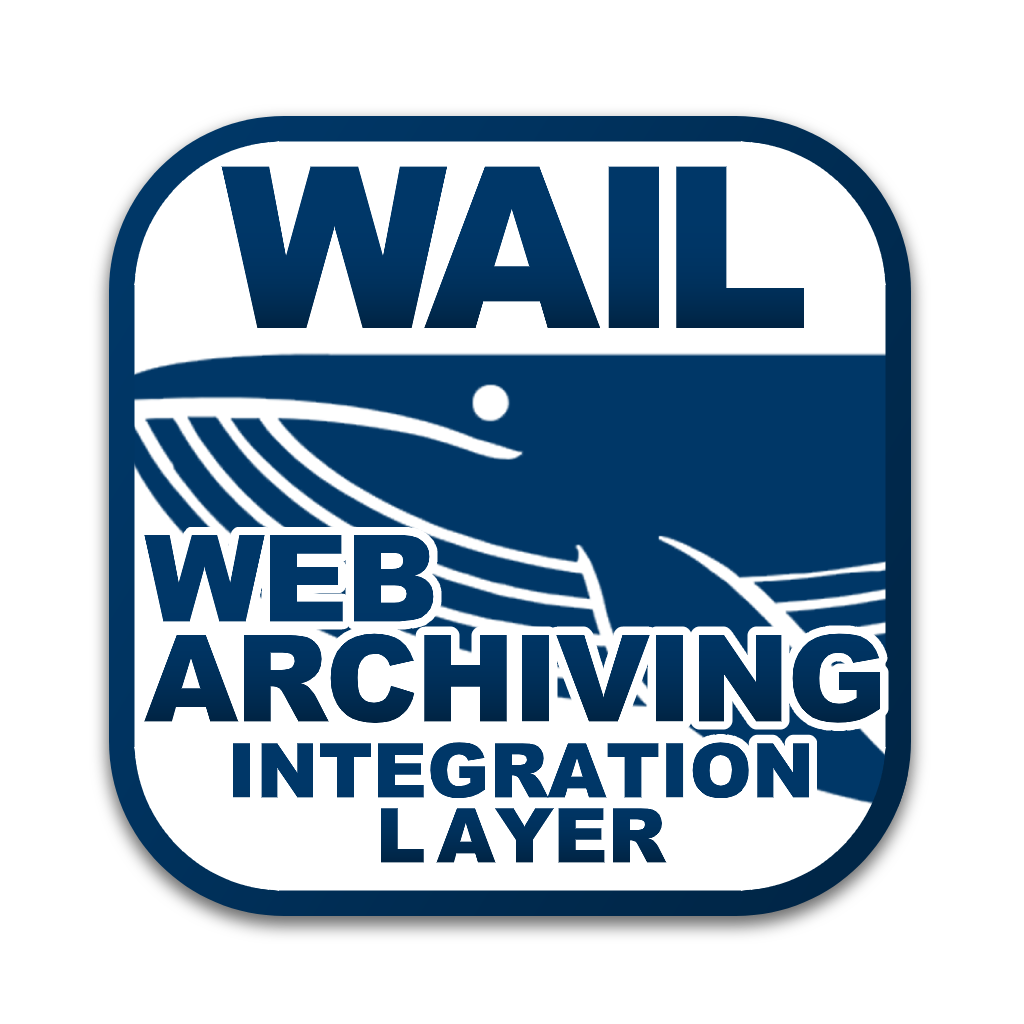
<style>
.page{position:relative;width:1024px;height:1024px;background:#ffffff}
.page>*{position:absolute;margin:0}
.t1{font:225px "Arial-Black";letter-spacing:-0.1em;color:#003768}
.t2{font:225px "Arial-Black";letter-spacing:-0.04em;color:#003768}
.t3{font:225px "Arial-Black";letter-spacing:-0.08em;color:#003768}
.t4{font:225px "Arial-Black";letter-spacing:-0.02em;color:#003768}
.t5{font:120px/100px "Arial-Black";letter-spacing:-0.025em;color:#003768}
.t6{font:75px/65px "Arial-Black";color:#003768}
.t7{font:75px/65px "Arial-Black";letter-spacing:0.15em;color:#003768}
</style>
<div class="page">
<p class="t1" style="left:221px;top:166px;width:583px;height:162px">W<span class="t2">A</span><span class="t3">I</span><span class="t4">L</span></p>
<p class="t5" style="left:144px;top:535px;width:737px;height:188px">WEB<br>ARCHIVING</p>
<p class="t6" style="left:233px;top:742px;width:576px;height:121px;text-align:center">INTEGRATION<br><span class="t7">L</span>AYER</p>
</div>
